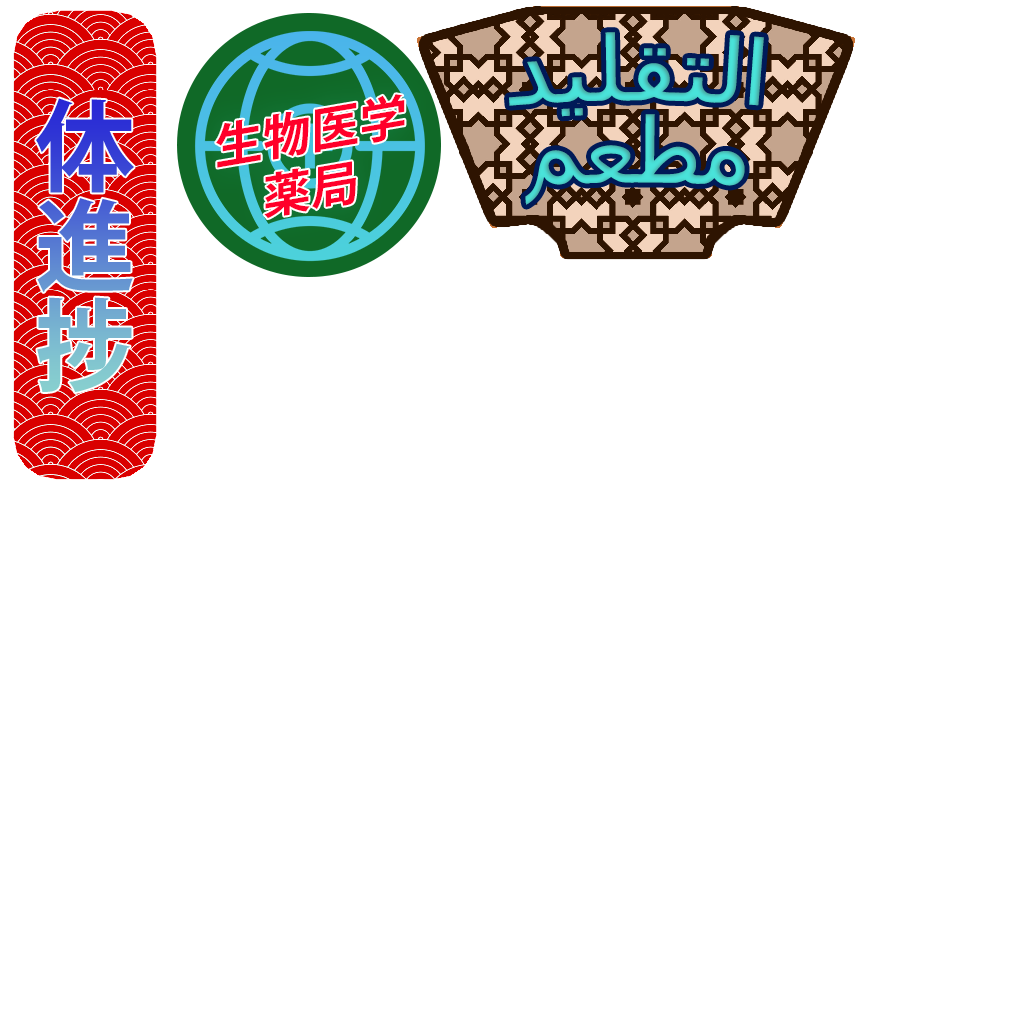
<style>
.page{position:relative;width:1024px;height:1024px;background:#ffffff}
.page>*{position:absolute;margin:0}
.t1{font:90px/82px "Tahoma";color:#49e3da}
.t2{font:48px "KozGoPr6N-Bold";color:#ff002a}
</style>
<div class="page">
<p class="t1" style="left:509px;top:32px;width:255px;height:173px;text-align:center">ﺪﻴﻠﻘﺘﻟﺍ ﻢﻌﻄﻣ</p>
<p class="t2" style="left:216px;top:94px;width:189px;height:125px;text-align:center;rotate:-10deg">生物医学<br>薬局</p>
</div>
